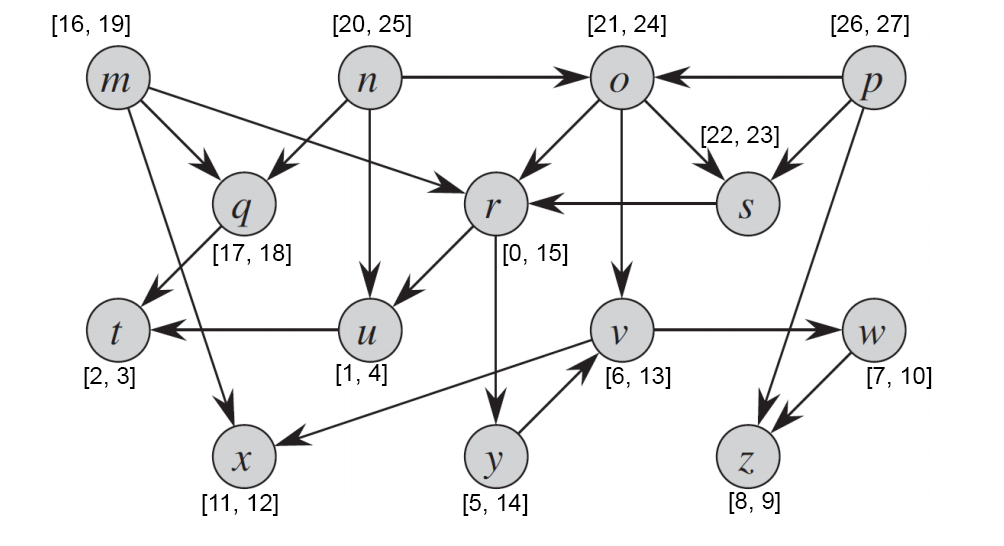
<style>
.page{position:relative;width:1004px;height:546px;background:#ffffff}
.page>*{position:absolute;margin:0}
.t1{font:24px "ArialMT";color:#000000}
</style>
<div class="page">
<p class="t1" style="left:52px;top:15px;width:78px;height:22px">[16, 19]</p>
<p class="t1" style="left:333px;top:15px;width:78px;height:22px">[20, 25]</p>
<p class="t1" style="left:588px;top:15px;width:78px;height:22px">[21, 24]</p>
<p class="t1" style="left:831px;top:15px;width:78px;height:22px">[26, 27]</p>
<p class="t1" style="left:701px;top:126px;width:78px;height:22px">[22, 23]</p>
<p class="t1" style="left:213px;top:244px;width:78px;height:22px">[17, 18]</p>
<p class="t1" style="left:503px;top:244px;width:65px;height:22px">[0, 15]</p>
<p class="t1" style="left:336px;top:364px;width:51px;height:22px">[1, 4]</p>
<p class="t1" style="left:84px;top:367px;width:51px;height:22px">[2, 3]</p>
<p class="t1" style="left:606px;top:367px;width:65px;height:22px">[6, 13]</p>
<p class="t1" style="left:867px;top:367px;width:65px;height:22px">[7, 10]</p>
<p class="t1" style="left:202px;top:494px;width:76px;height:22px">[11, 12]</p>
<p class="t1" style="left:463px;top:494px;width:65px;height:22px">[5, 14]</p>
<p class="t1" style="left:729px;top:492px;width:51px;height:22px">[8, 9]</p>
</div>
